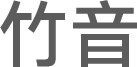
<style>
.page{position:relative;width:137px;height:67px;background:#ffffff}
.page>*{position:absolute;margin:0}
.t1{font:72px "MiSans-Medium";color:#5c5c5c}
</style>
<div class="page">
<p class="t1" style="left:0px;top:0px;width:138px;height:67px">竹音</p>
</div>
